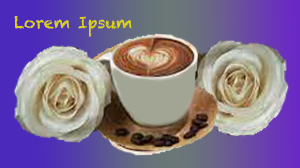
<style>
.page{position:relative;width:300px;height:168px}
.page>*{position:absolute;margin:0}
.t1{font:16px "Chalkduster";color:#e1d700}
</style>
<div class="page">
<p class="t1" style="left:14px;top:16px;width:118px;height:21px">Lorem Ipsum</p>
</div>
